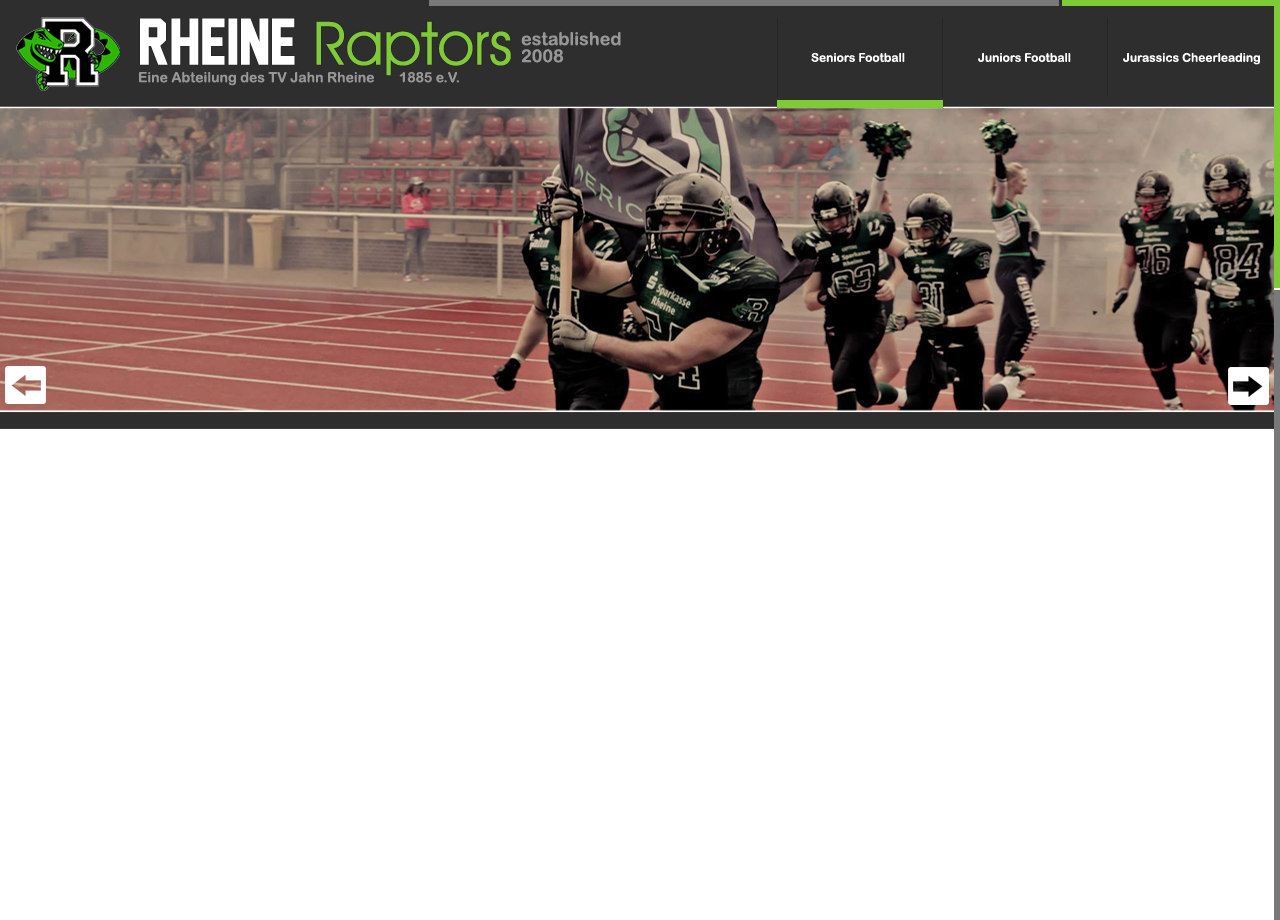
<style>
.page{position:relative;width:1280px;height:920px;background:#ffffff}
.page>*{position:absolute;margin:0}
.t1{font:60px "AvantGardeITCbyBT-Book";color:#7fcb35}
.t2{font:60px "JerseyM54";color:#ffffff}
.t3{font:18px/2.1px "ArialRoundedMTBold";color:#979797}
.t4{font:12px "ArialRoundedMTBold";color:#ffffff}
.t5{font:14px "ArialRoundedMTBold";color:#979797}
</style>
<div class="page">
<p class="t1" style="left:140px;top:18px;width:371px;height:58px"><span class="t2">Rheine </span>Raptors</p>
<p class="t3" style="left:521px;top:31px;width:100px;height:32px">established<br><br><br><br><br><br><br><br>2008</p>
<p class="t4" style="left:811px;top:52px;width:94px;height:10px">Seniors Football</p>
<p class="t4" style="left:978px;top:52px;width:93px;height:10px">Juniors Football</p>
<p class="t4" style="left:1123px;top:52px;width:137px;height:13px">Jurassics Cheerleading</p>
<p class="t5" style="left:139px;top:71px;width:320px;height:15px">Eine Abteilung des TV Jahn Rheine       1885 e.V.</p>
</div>
